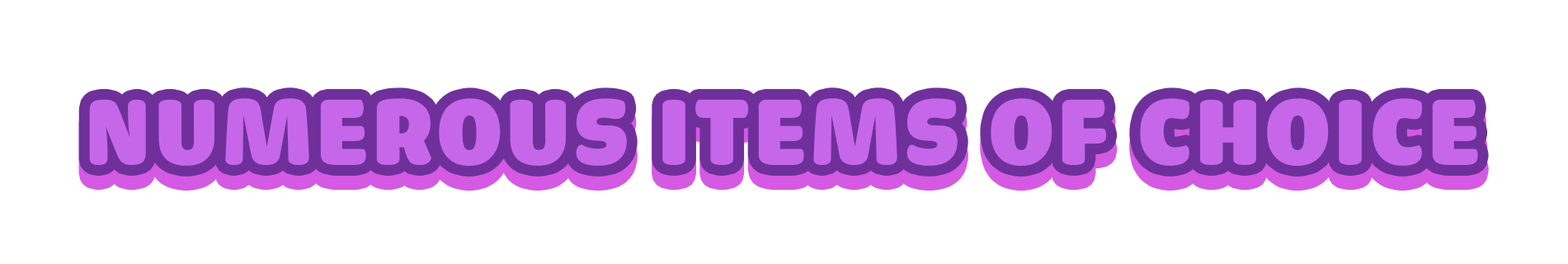
<style>
.page{position:relative;width:1568px;height:264px;background:#ffffff}
.page>*{position:absolute;margin:0}
.t1{font:99px "iCielCadena";letter-spacing:0.05em;color:#c667e9;text-transform:uppercase}
</style>
<div class="page">
<p class="t1" style="left:89px;top:98px;width:1389px;height:68px">Numerous items of choice</p>
</div>
